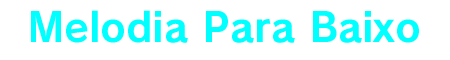
<style>
.page{position:relative;width:450px;height:60px;background:#ffffff}
.page>*{position:absolute;margin:0}
.t1{font:40px "RodinPro-B";color:#00ffff}
</style>
<div class="page">
<p class="t1" style="left:31px;top:10px;width:388px;height:33px">Melodia Para Baixo</p>
</div>
